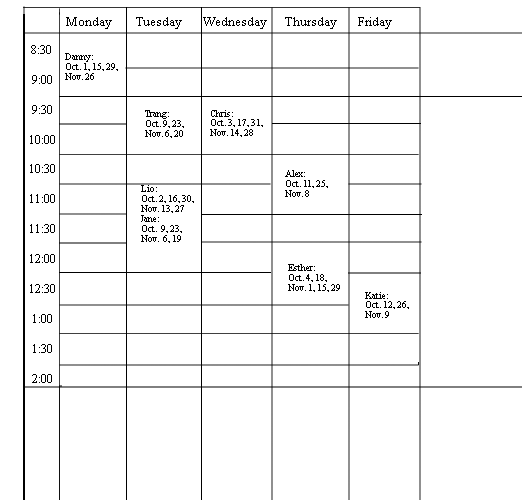
<style>
.page{position:relative;width:522px;height:500px;background:#ffffff}
.page>*{position:absolute;margin:0}
.t1{font:12.5px "TimesNewRomanPSMT";color:#000000}
.t2{font:8.3px "TimesNewRomanPSMT";color:#000000}
</style>
<div class="page">
<p class="t1" style="left:66px;top:17px;width:326px;height:12px">Monday        Tuesday       Wednesday      Thursday       Friday</p>
<p class="t1" style="left:30px;top:45px;width:25px;height:338px"><span class="t2"><br><br> </span>8:30<br><br> 9:00<br> <br> 9:30<br><br>10:00<br><br>10:30<br><br>11:00<br><br>11:30<br><br>12:00<br><br>12:30<br><br> 1:00<br><br> 1:30<br><br> 2:00</p>
<p class="t2" style="left:65px;top:53px;width:53px;height:27px">Danny: <br>Oct. 1, 15, 29,  <br>Nov. 26</p>
<p class="t2" style="left:145px;top:110px;width:39px;height:28px">Trang: <br>Oct. 9, 23,<br>Nov. 6, 20</p>
<p class="t2" style="left:210px;top:110px;width:53px;height:27px">Chris:<br>Oct. 3, 17, 31,<br>Nov. 14, 28</p>
<p class="t2" style="left:285px;top:170px;width:43px;height:27px">Alex:<br>Oct. 11, 25,<br>Nov. 8</p>
<p class="t2" style="left:288px;top:264px;width:52px;height:28px">Esther:<br>Oct. 4, 18,<br>Nov. 1, 15, 29</p>
</div>
